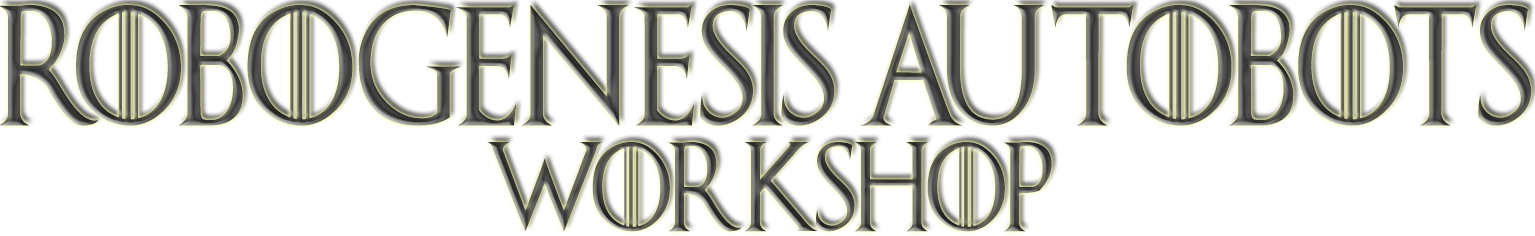
<style>
.page{position:relative;width:1535px;height:236px;background:#ffffff}
.page>*{position:absolute;margin:0}
.t1{font:120.2px "GameofThrones";scale:0.87 1}
.t2{font:89.1px "GameofThrones";scale:0.87 1}
</style>
<div class="page">
<p class="t1" style="left:0px;top:4px;width:1532px;height:122px">ROBOGENESIS AUTOBOTS</p>
<p class="t2" style="left:487px;top:142px;width:565px;height:90px">Workshop</p>
</div>
